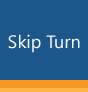
<style>
.page{position:relative;width:88px;height:92px;background:#1c578b}
.page>*{position:absolute;margin:0}
.t1{font:18px "SegoeUI";color:#ffffff}
</style>
<div class="page">
<p class="t1" style="left:8px;top:34px;width:72px;height:19px">Skip Turn</p>
</div>
